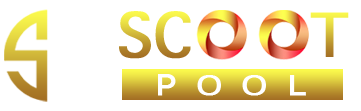
<style>
.page{position:relative;width:361px;height:111px;background:#ffffff}
.page>*{position:absolute;margin:0}
.t1{font:81.1px "AppleSymbols";font-weight:bold}
.t2{font:30.5px "SukhumvitSet-Medium";letter-spacing:0.5em;color:#ffffff;text-transform:uppercase;font-weight:bold;scale:1.23 1}
</style>
<div class="page">
<p class="t1" style="left:119px;top:11px;width:230px;height:48px">SC    T</p>
<p class="t2" style="left:158px;top:74px;width:148px;height:22px">POOL</p>
</div>
